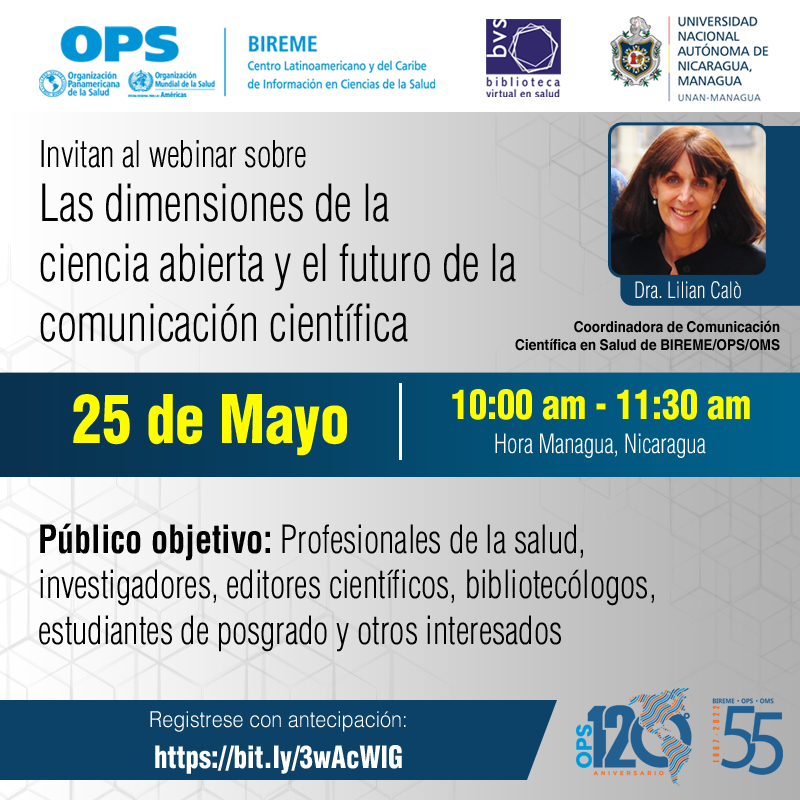
<style>
.page{position:relative;width:800px;height:800px}
.page>*{position:absolute;margin:0}
.t1{font:36px "Helvetica-CondensedLight";color:#000000;scale:0.9 1}
.t2{font:50px "Helvetica-CondensedLight";color:#000000;scale:0.9 1}
.t3{font:22px "Helvetica-CondensedLight";color:#ffffff;scale:0.9 1}
.t4{font:15px "HelveticaWorld-Bold";color:#000000;scale:0.9 1}
.t5{font:40px "Helvetica-CondensedBlack";color:#fffc00;scale:0.9 1}
.t6{font:65.3px "Helvetica-CondensedBlack";color:#fffc00;scale:0.9 1}
.t7{font:26px "Helvetica-CondensedLight";color:#ffffff;scale:0.9 1}
.t8{font:38px "Helvetica-CondensedLight";color:#000000;scale:0.9 1}
.t9{font:38px "Helvetica-CondensedBold";color:#000000;scale:0.9 1}
.t10{font:22px "Helvetica-Light";color:#ffffff;scale:0.9 1}
.t11{font:30px "Helvetica-CondensedBlack";color:#ffffff;scale:0.9 1}
</style>
<div class="page">
<p class="t1" style="left:41px;top:140px;width:265px;height:28px">Invitan al webinar sobre</p>
<p class="t2" style="left:40px;top:183px;width:476px;height:159px">Las dimensiones de la<br>ciencia abierta y el futuro de la <br>comunicación científica</p>
<p class="t3" style="left:635px;top:281px;width:106px;height:18px">Dra. Lilian Calò</p>
<p class="t4" style="left:515px;top:320px;width:265px;height:31px;text-align:right">Coordinadora de Comunicación<br> Científica en Salud de BIREME/OPS/OMS</p>
<p class="t5" style="left:452px;top:389px;width:298px;height:31px">10:00 am - 11:30 am</p>
<p class="t6" style="left:73px;top:394px;width:274px;height:62px">25 de Mayo</p>
<p class="t7" style="left:495px;top:433px;width:211px;height:25px">Hora Managua, Nicaragua</p>
<p class="t8" style="left:39px;top:523px;width:615px;height:129px"><span class="t9">Público objetivo:</span> Profesionales de la salud, investigadores, editores científicos, bibliotecólogos, estudiantes de posgrado y otros interesados</p>
<p class="t10" style="left:150px;top:711px;width:256px;height:21px">Registrese con antecipación:</p>
<p class="t11" style="left:155px;top:745px;width:247px;height:29px">https://bit.ly/3wAcWlG</p>
</div>
